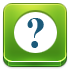
<style>
.page{position:relative;width:70px;height:70px;background:#ffffff}
.page>*{position:absolute;margin:0}
.t1{font:42px "TimesNewRomanPS-BoldMT";color:#1c5a7a}
</style>
<div class="page">
<p class="t1" style="left:27px;top:18px;width:17px;height:30px">?</p>
</div>
